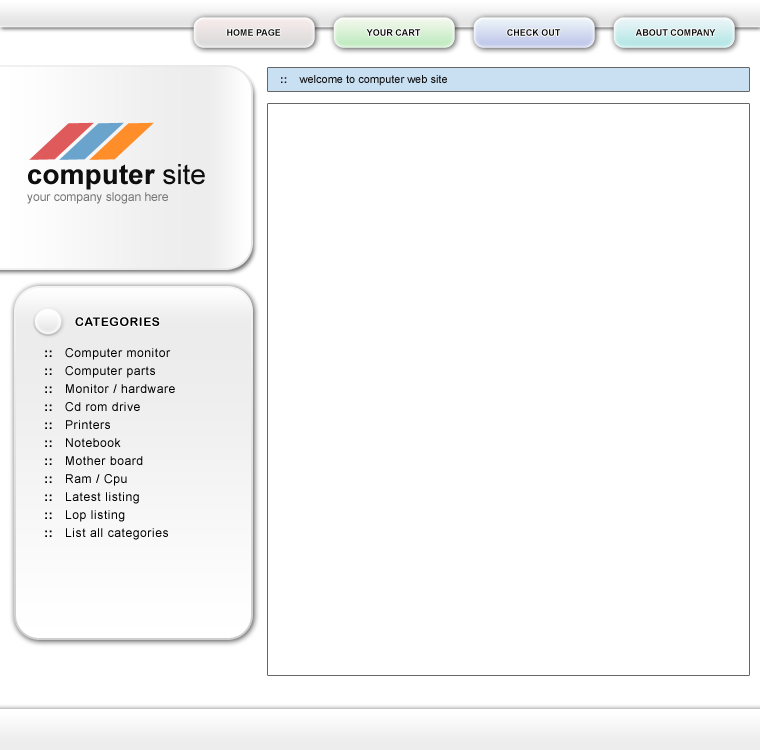
<style>
.page{position:relative;width:760px;height:750px;background:#ffffff}
.page>*{position:absolute;margin:0}
.t1{font:9px "Arial-BoldMT";color:#0f0e0e}
.t2{font:11px "ArialMT";color:#0f0e0e}
.t3{font:11px "Arial-BoldMT";color:#0f0e0e}
.t4{font:28px "Arial-BoldMT";color:#0f0e0e}
.t5{font:28px "ArialMT";color:#0f0e0e}
.t6{font:12px "ArialMT";color:#757575}
.t7{font:12px "ArialRoundedMTBold";letter-spacing:0.05em;color:#000000}
.t8{font:12px/18px "ArialMT";letter-spacing:0.05em;color:#000000}
.t9{font:12px/18px "Arial-BoldMT";letter-spacing:0.05em;color:#000000}
</style>
<div class="page">
<p class="t1" style="left:227px;top:29px;width:54px;height:7px">HOME PAGE</p>
<p class="t1" style="left:366px;top:29px;width:55px;height:7px">YOUR CART</p>
<p class="t1" style="left:507px;top:29px;width:54px;height:7px">CHECK OUT</p>
<p class="t1" style="left:635px;top:29px;width:81px;height:7px">ABOUT COMPANY</p>
<p class="t2" style="left:281px;top:75px;width:166px;height:11px"><span class="t3">::</span>    welcome to computer web site</p>
<p class="t4" style="left:28px;top:164px;width:177px;height:26px">computer<span class="t5"> site</span></p>
<p class="t6" style="left:27px;top:192px;width:141px;height:12px">your company slogan here</p>
<p class="t7" style="left:75px;top:317px;width:85px;height:9px">CATEGORIES</p>
<p class="t8" style="left:45px;top:348px;width:130px;height:192px"><span class="t9">::   </span>Computer monitor<br><span class="t9">:: </span>  Computer parts<br><span class="t9">:: </span>  Monitor / hardware<br><span class="t9">:: </span>  Cd rom drive<br><span class="t9">::</span>   Printers<br><span class="t9">::</span>   Notebook<br><span class="t9">::</span>   Mother board<br><span class="t9">::</span>   Ram / Cpu<br><span class="t9">:: </span>  Latest listing<br><span class="t9">:: </span>  Lop listing<br><span class="t9">:: </span>  List all categories</p>
</div>
